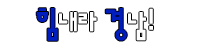
<style>
.page{position:relative;width:200px;height:50px;background:#ffffff}
.page>*{position:absolute;margin:0}
.t1{font:30px "ahn2006-B";letter-spacing:-0.04em;color:#ffffff}
.t2{font:35px "ahn2006-B";letter-spacing:-0.04em;color:#001dbe}
.t3{font:30px "ahn2006-B";letter-spacing:-0.04em;color:#fffefe}
.t4{font:33px "ahn2006-B";letter-spacing:-0.04em;color:#fffefe}
</style>
<div class="page">
<p class="t1" style="left:36px;top:8px;width:117px;height:33px"><span class="t2">힘</span>내라 <span class="t2">경</span><span class="t3">남</span><span class="t4">!</span></p>
</div>
